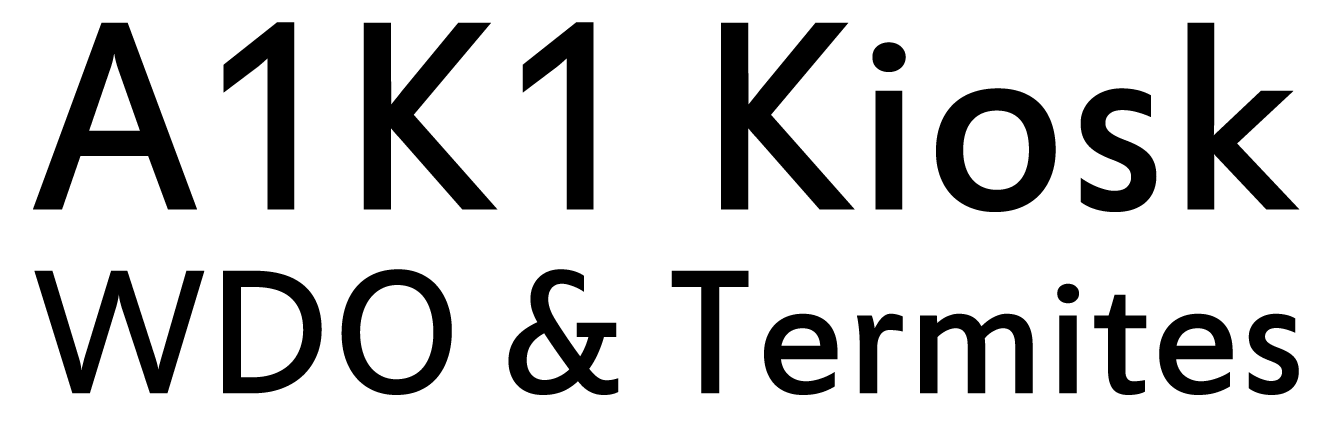
<style>
.page{position:relative;width:1330px;height:434px;background:#ffffff}
.page>*{position:absolute;margin:0}
.t1{font:295px "EstrangeloEdessa";color:#000000;scale:0.95 1}
.t2{font:193.6px "EstrangeloEdessa";color:#000000;scale:0.95 1}
</style>
<div class="page">
<p class="t1" style="left:33px;top:22px;width:1267px;height:190px">A1K1 Kiosk</p>
<p class="t2" style="left:34px;top:269px;width:1265px;height:126px">WDO &amp; Termites</p>
</div>
